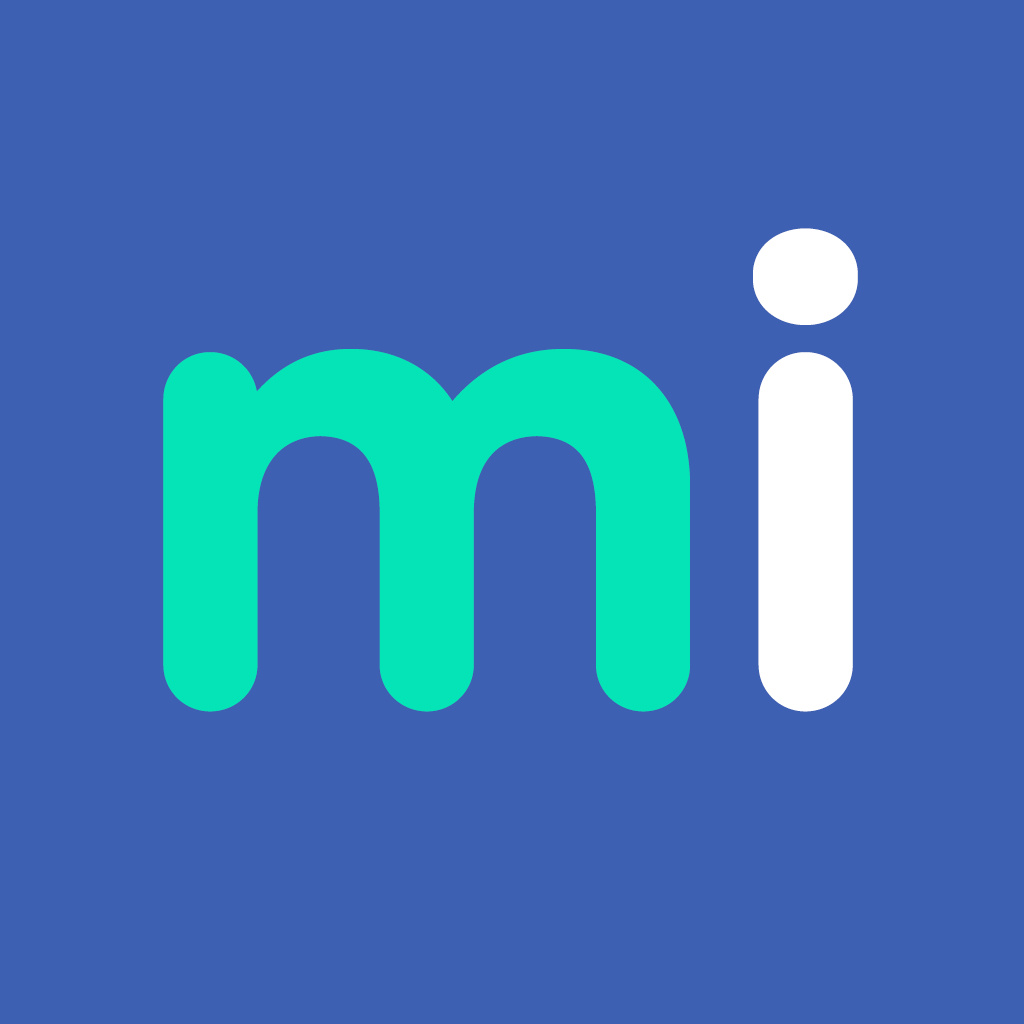
<style>
.page{position:relative;width:1024px;height:1024px;background:#3d60b3}
.page>*{position:absolute;margin:0}
.t1{font:634.3px "GothamRounded-Medium";color:#ffffff;font-weight:bold}
.t2{font:634.3px "GothamRounded-Medium";color:#05e4b7;font-weight:bold}
</style>
<div class="page">
<p class="t1" style="left:753px;top:228px;width:105px;height:484px">i</p>
<p class="t2" style="left:163px;top:349px;width:527px;height:363px">m</p>
</div>
